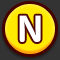
<style>
.page{position:relative;width:60px;height:60px;background:#333333}
.page>*{position:absolute;margin:0}
.t1{font:36px "MoebiusKorea-Bold";letter-spacing:-0.075em;color:#ffffff}
</style>
<div class="page">
<p class="t1" style="left:19px;top:15px;width:22px;height:27px">N</p>
</div>
